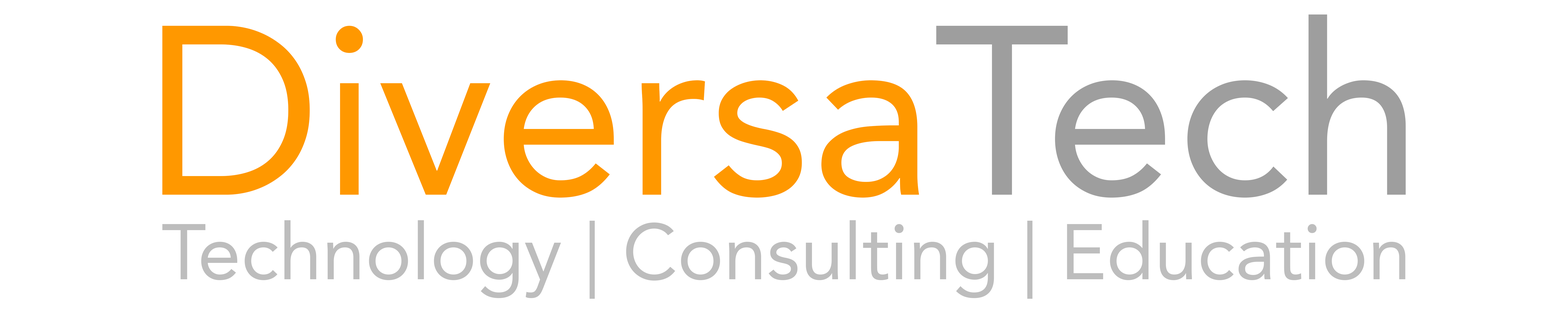
<style>
.page{position:relative;width:1568px;height:314px;background:#ffffff}
.page>*{position:absolute;margin:0}
.t1{font:238px "Avenir-Roman";color:#ff9800}
.t2{font:238px "Avenir-Roman";color:#9e9e9e}
.t3{font:78px "Avenir-Roman";color:#bdbdbd}
</style>
<div class="page">
<p class="t1" style="left:162px;top:14px;width:1244px;height:183px">Diversa<span class="t2">Tech</span></p>
<p class="t3" style="left:162px;top:220px;width:1243px;height:78px">Technology | Consulting | Education</p>
</div>
